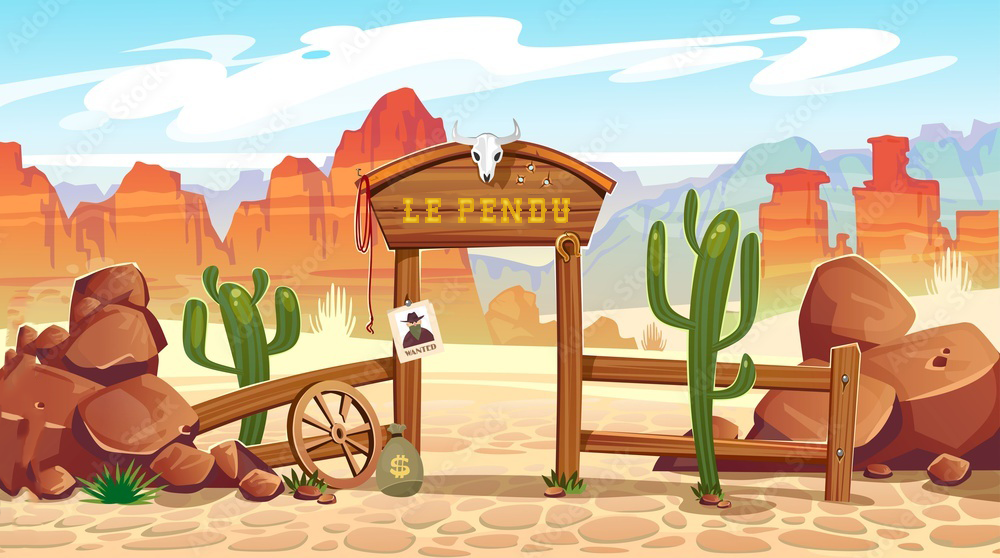
<style>
.page{position:relative;width:1000px;height:558px}
.page>*{position:absolute;margin:0}
.t1{font:33.3px "WesternNormal";letter-spacing:0.1em;color:#dfa512;text-transform:uppercase;font-weight:bold}
</style>
<div class="page">
<p class="t1" style="left:403px;top:198px;width:167px;height:25px">LE PENDU</p>
</div>
